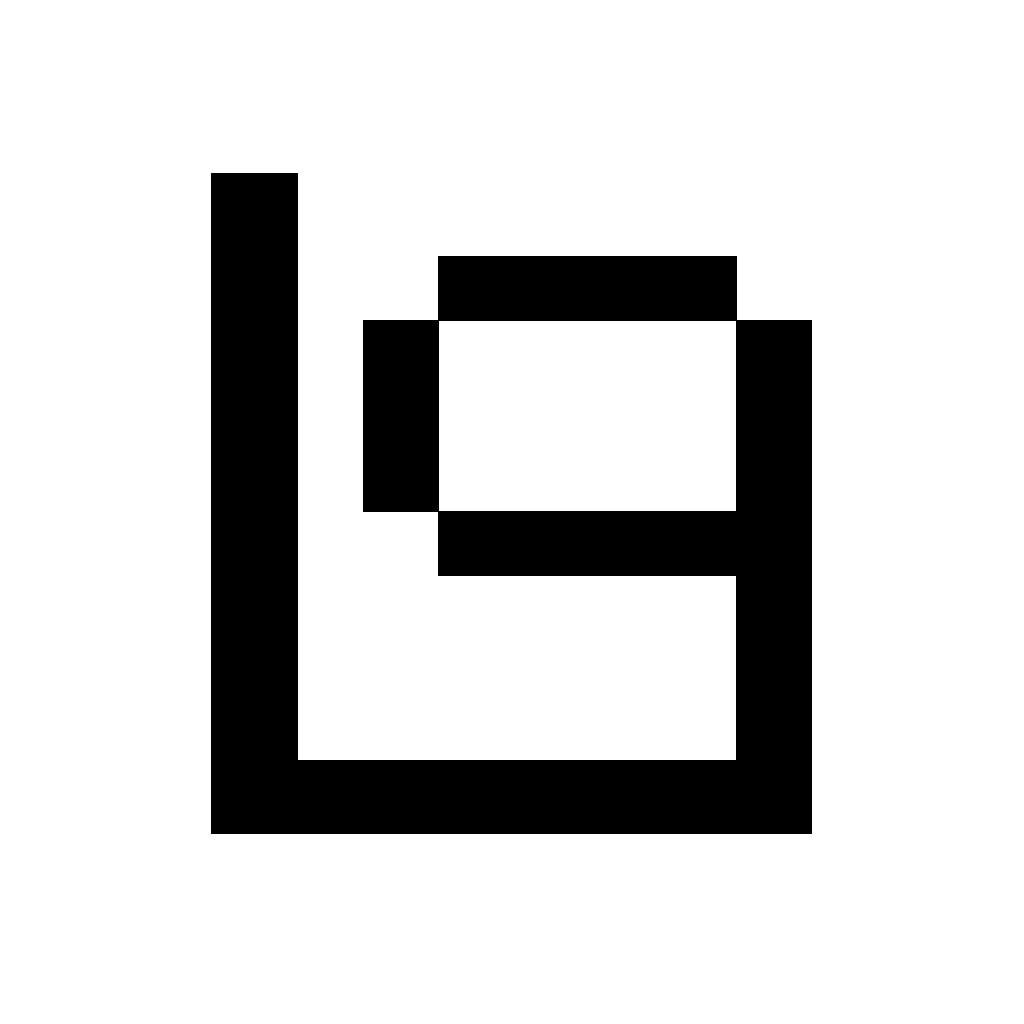
<style>
.page{position:relative;width:1024px;height:1024px;background:#ffffff}
.page>*{position:absolute;margin:0}
.t1{font:879.8px "Pixel_3";color:#000000;scale:1.17 1}
.t2{font:764.8px "Pixel_3";color:#000000;scale:1.17 1}
</style>
<div class="page">
<p class="t1" style="left:211px;top:173px;width:601px;height:661px">L</p>
<p class="t2" style="left:363px;top:256px;width:449px;height:575px">9</p>
</div>
